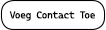
<style>
.page{position:relative;width:106px;height:30px;background:#ffffff}
.page>*{position:absolute;margin:0}
.t1{font:10px "CascadiaCode";letter-spacing:-0.05em;color:#000000}
</style>
<div class="page">
<p class="t1" style="left:9px;top:11px;width:86px;height:10px">Voeg Contact Toe</p>
</div>
